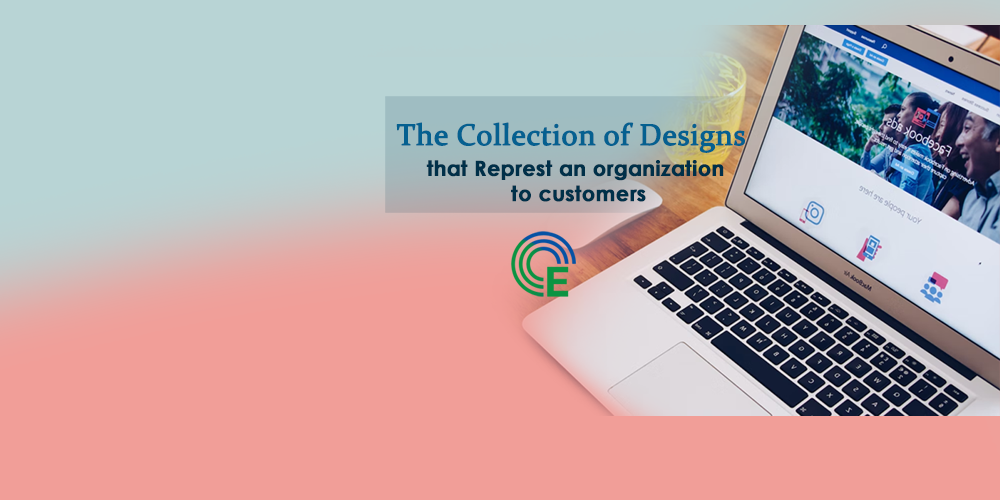
<style>
.page{position:relative;width:1000px;height:500px;background:#f19e98}
.page>*{position:absolute;margin:0}
.t1{font:30px "Constantia";color:#056090;font-weight:bold}
.t2{font:21px "CenturyGothic-Bold";color:#003049;font-weight:bold}
</style>
<div class="page">
<p class="t1" style="left:396px;top:122px;width:349px;height:31px">The Collection of Designs</p>
<p class="t2" style="left:426px;top:160px;width:298px;height:42px;text-align:center">that Represt an organization <br> to customers</p>
</div>
